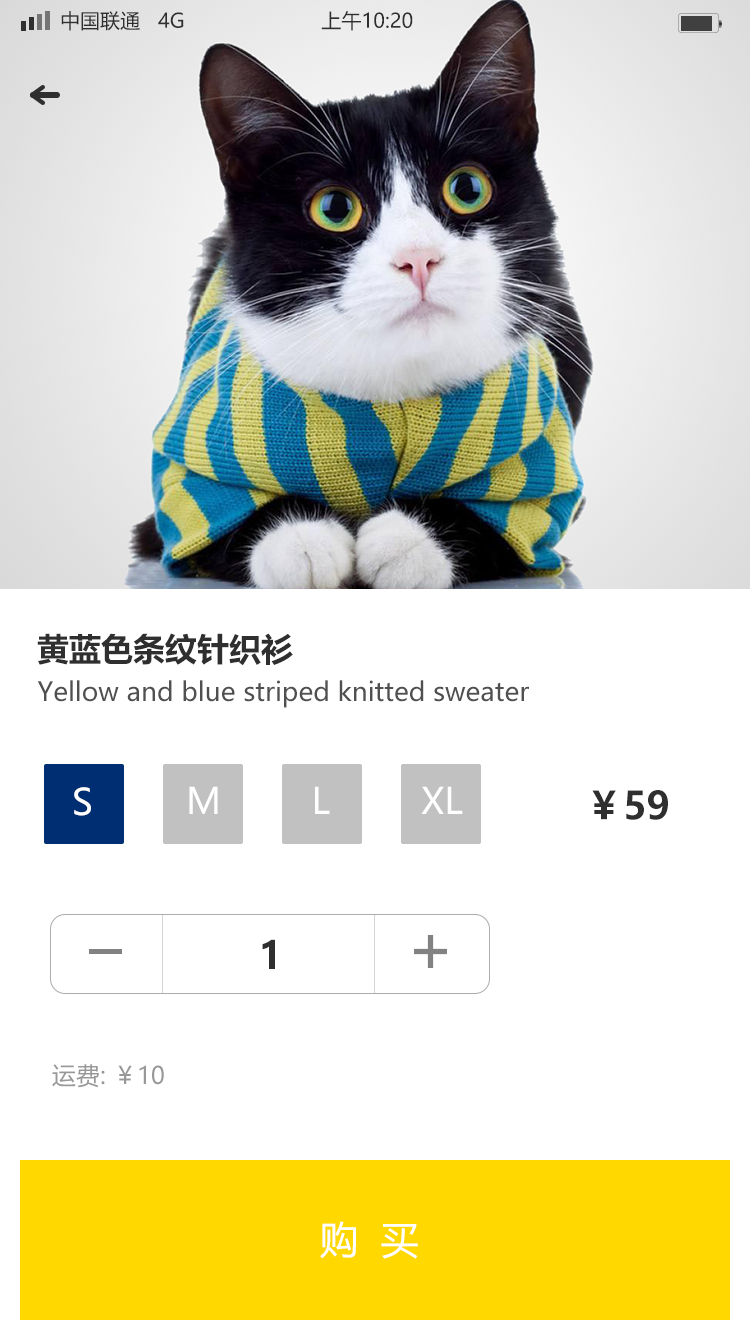
<style>
.page{position:relative;width:750px;height:1334px;background:#ffffff}
.page>*{position:absolute;margin:0}
.t1{font:20px "MicrosoftYaHei";color:#2f2f2f}
.t2{font:32px "MicrosoftYaHei-Bold";color:#2f2f2f}
.t3{font:26px "MicrosoftYaHei";color:#505050}
.t4{font:36px "MicrosoftYaHei";color:#ffffff}
.t5{font:38px "MicrosoftYaHei-Bold";color:#2f2f2f}
.t6{font:24px "MicrosoftYaHei";color:#989898}
.t7{font:38px "MicrosoftYaHei";color:#ffffff}
</style>
<div class="page">
<p class="t1" style="left:61px;top:11px;width:352px;height:20px">中国联通   4G                       上午10:20</p>
<p class="t2" style="left:37px;top:633px;width:256px;height:33px">黄蓝色条纹针织衫</p>
<p class="t3" style="left:37px;top:680px;width:492px;height:28px">Yellow and blue striped knitted sweater</p>
<p class="t4" style="left:74px;top:787px;width:17px;height:29px">S</p>
<p class="t4" style="left:189px;top:786px;width:29px;height:28px">M</p>
<p class="t4" style="left:315px;top:786px;width:15px;height:28px">L</p>
<p class="t4" style="left:421px;top:786px;width:42px;height:28px">XL</p>
<p class="t5" style="left:592px;top:790px;width:76px;height:30px">￥59</p>
<p class="t5" style="left:262px;top:939px;width:13px;height:30px">1</p>
<p class="t6" style="left:52px;top:1064px;width:112px;height:24px">运费: ￥10</p>
<p class="t7" style="left:320px;top:1221px;width:98px;height:38px">购  买</p>
</div>
